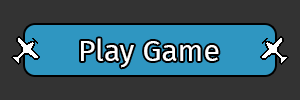
<style>
.page{position:relative;width:300px;height:100px;background:#333333}
.page>*{position:absolute;margin:0}
.t1{font:30px "FiraSans-Regular";color:#ffffff}
</style>
<div class="page">
<p class="t1" style="left:81px;top:38px;width:138px;height:30px">Play Game</p>
</div>
